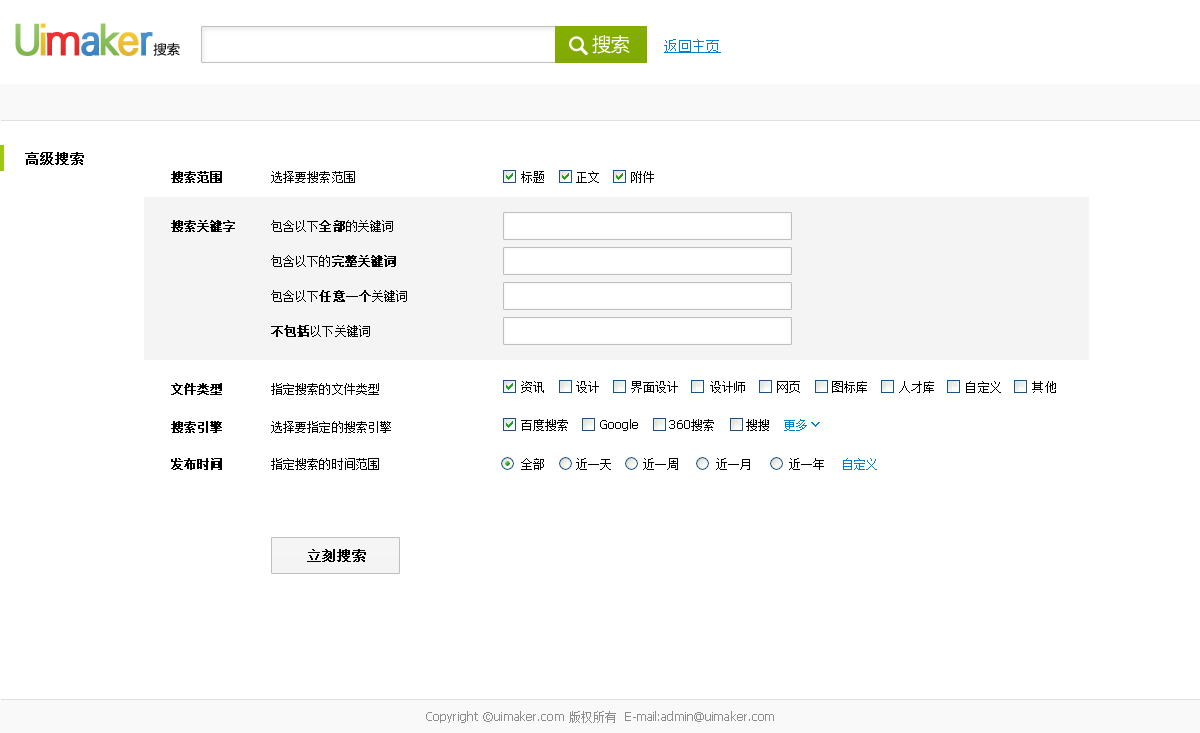
<style>
.page{position:relative;width:1200px;height:733px;background:#ffffff}
.page>*{position:absolute;margin:0}
.t1{font:40.9px "Tianshi-HeiOld";letter-spacing:-0.05em;color:#8abe58;font-weight:bold}
.t2{font:40.9px "Tianshi-HeiOld";letter-spacing:-0.05em;color:#e8bb33;font-weight:bold}
.t3{font:40.9px "Tianshi-HeiOld";letter-spacing:-0.05em;color:#89bd58;font-weight:bold}
.t4{font:40.9px "Tianshi-HeiOld";letter-spacing:-0.05em;color:#e63030;font-weight:bold}
.t5{font:40.9px "Tianshi-HeiOld";letter-spacing:-0.05em;color:#438ac5;font-weight:bold}
.t6{font:40.9px "Tianshi-HeiOld";letter-spacing:-0.05em;color:#ebbf33;font-weight:bold}
.t7{font:40.9px "Tianshi-HeiOld";letter-spacing:-0.05em;color:#468dc8;font-weight:bold}
.t8{font:18.9px "MicrosoftYaHei";letter-spacing:-0.025em;color:#ffffff}
.t9{font:14px "SimSun";letter-spacing:0.01em;color:#0080cc;text-decoration:underline}
.t10{font:13.1px "FZLTXHFW--GB1-0";letter-spacing:0.01em}
.t11{font:14px "SimSun";letter-spacing:0.01em;color:#000000;font-weight:bold}
.t12{font:12px "SimSun";letter-spacing:0.01em;color:#000000;font-weight:bold}
.t13{font:12px "SimSun";letter-spacing:0.01em;color:#000000}
.t14{font:12px/35px "SimSun";letter-spacing:0.01em;color:#000000}
.t15{font:12px/35px "SimSun";letter-spacing:0.01em;color:#000000;font-weight:bold}
.t16{font:12px "Tahoma";letter-spacing:0.01em;color:#000000}
.t17{font:12px "SimSun";color:#0080cc}
.t18{font:14px "SimSun";color:#000000;font-weight:bold}
.t19{font:12px "Tahoma";letter-spacing:0.01em;color:#8c8c8c}
.t20{font:12px "SimSun";letter-spacing:0.01em;color:#8c8c8c}
</style>
<div class="page">
<p class="t1" style="left:15px;top:23px;width:24px;height:33px">U</p>
<p class="t2" style="left:40px;top:23px;width:6px;height:33px">i</p>
<p class="t3" style="left:100px;top:23px;width:20px;height:33px">k</p>
<p class="t4" style="left:46px;top:32px;width:34px;height:24px">m</p>
<p class="t5" style="left:81px;top:32px;width:19px;height:24px">a</p>
<p class="t6" style="left:118px;top:32px;width:21px;height:24px">e</p>
<p class="t7" style="left:140px;top:32px;width:13px;height:24px">r</p>
<p class="t8" style="left:592px;top:35px;width:38px;height:19px">搜索</p>
<p class="t9" style="left:664px;top:39px;width:57px;height:14px">返回主页</p>
<p class="t10" style="left:153px;top:42px;width:27px;height:14px">搜索</p>
<p class="t11" style="left:25px;top:152px;width:59px;height:13px">高级搜索</p>
<p class="t12" style="left:171px;top:171px;width:51px;height:12px">搜索范围</p>
<p class="t13" style="left:271px;top:171px;width:84px;height:12px">选择要搜索范围</p>
<p class="t13" style="left:521px;top:171px;width:133px;height:12px">标题     正文     附件</p>
<p class="t12" style="left:171px;top:220px;width:64px;height:12px">搜索关键字</p>
<p class="t14" style="left:271px;top:220px;width:136px;height:117px">包含以下<span class="t15">全部</span>的关键词<br>包含以下的<span class="t15">完整关键词<br></span>包含以下<span class="t15">任意一个</span>关键词<br><span class="t15">不包括</span>以下关键词</p>
<p class="t12" style="left:171px;top:383px;width:51px;height:12px">文件类型</p>
<p class="t13" style="left:271px;top:383px;width:108px;height:12px">指定搜索的文件类型</p>
<p class="t13" style="left:521px;top:381px;width:535px;height:12px">资讯     设计     界面设计     设计师     网页     图标库     人才库     自定义     其他</p>
<p class="t12" style="left:171px;top:421px;width:51px;height:12px">搜索引擎</p>
<p class="t13" style="left:271px;top:421px;width:120px;height:12px">选择要指定的搜索引擎</p>
<p class="t16" style="left:521px;top:419px;width:248px;height:12px"><span class="t13">百度搜索     </span>Google     360<span class="t13">搜索     搜搜</span></p>
<p class="t17" style="left:784px;top:419px;width:23px;height:12px">更多</p>
<p class="t12" style="left:171px;top:458px;width:51px;height:12px">发布时间</p>
<p class="t13" style="left:271px;top:458px;width:108px;height:12px">指定搜索的时间范围</p>
<p class="t13" style="left:521px;top:458px;width:303px;height:12px">全部     近一天     近一周      近一月      近一年</p>
<p class="t17" style="left:843px;top:458px;width:34px;height:12px">自定义</p>
<p class="t18" style="left:307px;top:549px;width:59px;height:13px">立刻搜索</p>
<p class="t19" style="left:426px;top:711px;width:348px;height:12px">Copyright ©uimaker.com <span class="t20">版权所有</span>  E-mail:admin@uimaker.com</p>
</div>
